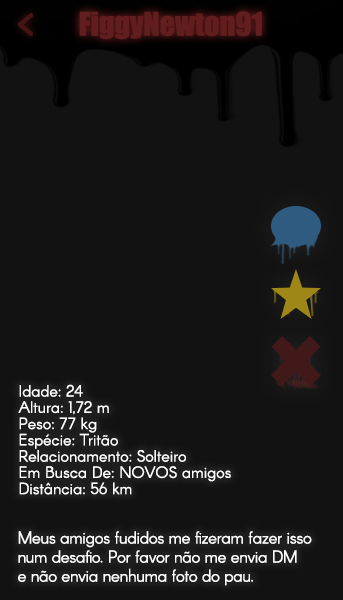
<style>
.page{position:relative;width:343px;height:600px;background:#121212}
.page>*{position:absolute;margin:0}
.t1{font:16px "Arcon-Regular";color:#ffffff}
.t2{font:17px/22px "Arcon-Regular";letter-spacing:-0.027em;color:#ffffff}
</style>
<div class="page">
<p class="t1" style="left:18px;top:384px;width:213px;height:111px">Idade: 24<br>Altura: 1,72 m<br>Peso: 77 kg<br>Espécie: Tritão<br>Relacionamento: Solteiro<br>Em Busca De: NOVOS amigos<br>Distância: 56 km</p>
<p class="t2" style="left:18px;top:531px;width:294px;height:55px">Meus amigos fudidos me fizeram fazer isso<br>num desafio. Por favor não me envia DM<br>e não envia nenhuma foto do pau.</p>
</div>
